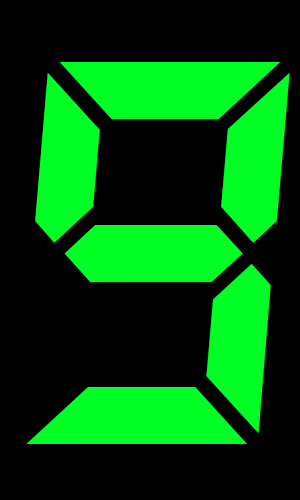
<style>
.page{position:relative;width:300px;height:500px;background:#000000}
.page>*{position:absolute;margin:0}
.t1{font:600px "LetsgoDigital-Regular";color:#00ff24}
</style>
<div class="page">
<p class="t1" style="left:26px;top:62px;width:264px;height:382px">9</p>
</div>
